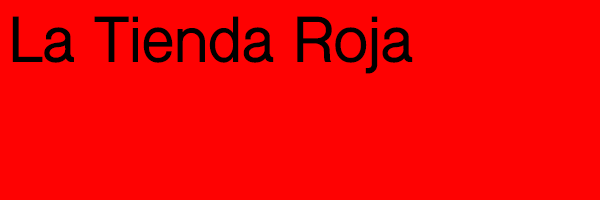
<style>
.page{position:relative;width:600px;height:200px;background:#fe0202}
.page>*{position:absolute;margin:0}
.t1{font:60px "ShreeDev0714-Bold";color:#000000}
</style>
<div class="page">
<p class="t1" style="left:12px;top:16px;width:401px;height:58px">La Tienda Roja</p>
</div>
